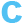
<style>
.page{position:relative;width:24px;height:24px;background:#ffffff}
.page>*{position:absolute;margin:0}
.t1{font:41.3px "Arial-BoldMT";letter-spacing:-0.12em;color:#51c1f3}
</style>
<div class="page">
<p class="t1" style="left:1px;top:1px;width:21px;height:22px">c</p>
</div>
